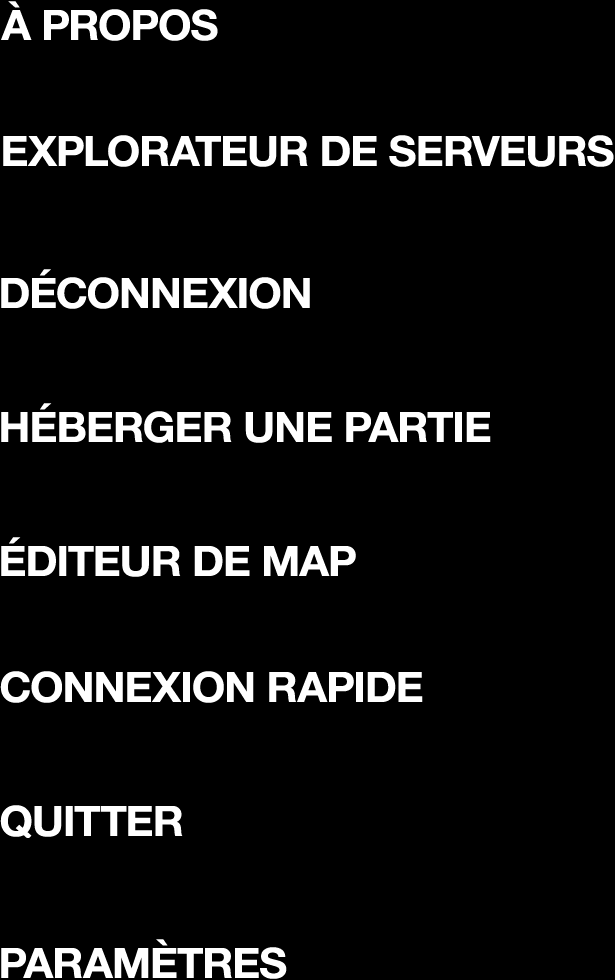
<style>
.page{position:relative;width:615px;height:980px;background:#000000}
.page>*{position:absolute;margin:0}
.t1{font:42px "HelveticaNeueBold";letter-spacing:-0.021em;color:#ffffff;scale:1.03 1}
</style>
<div class="page">
<p class="t1" style="left:1px;top:1px;width:217px;height:40px">À PROPOS</p>
<p class="t1" style="left:3px;top:135px;width:611px;height:32px">EXPLORATEUR DE SERVEURS</p>
<p class="t1" style="left:1px;top:269px;width:309px;height:40px">DÉCONNEXION</p>
<p class="t1" style="left:1px;top:403px;width:490px;height:40px">HÉBERGER UNE PARTIE</p>
<p class="t1" style="left:1px;top:537px;width:355px;height:40px">ÉDITEUR DE MAP</p>
<p class="t1" style="left:0px;top:671px;width:423px;height:32px">CONNEXION RAPIDE</p>
<p class="t1" style="left:0px;top:805px;width:183px;height:34px">QUITTER</p>
<p class="t1" style="left:1px;top:939px;width:286px;height:40px">PARAMÈTRES</p>
</div>
